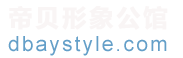
<style>
.page{position:relative;width:183px;height:58px;background:#ffffff}
.page>*{position:absolute;margin:0}
.t1{font:24px "MicrosoftYaHei";letter-spacing:0.1em;color:#f9f5f5;font-weight:bold}
.t2{font:21px "ArialMT";letter-spacing:0.1em;color:#649fc8}
</style>
<div class="page">
<p class="t1" style="left:9px;top:6px;width:159px;height:24px">帝贝形象公馆</p>
<p class="t2" style="left:8px;top:36px;width:159px;height:20px">dbaystyle.com</p>
</div>
